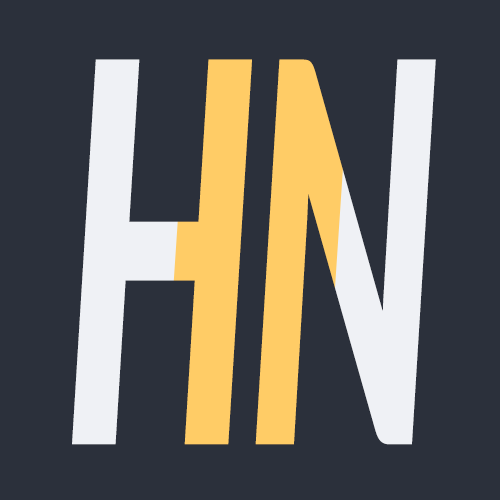
<style>
.page{position:relative;width:500px;height:500px;background:#2b303b}
.page>*{position:absolute;margin:0}
.t1{font:527.8px "Lato-BlackItalic";scale:0.5 1}
</style>
<div class="page">
<p class="t1" style="left:72px;top:59px;width:364px;height:386px">HN</p>
</div>
